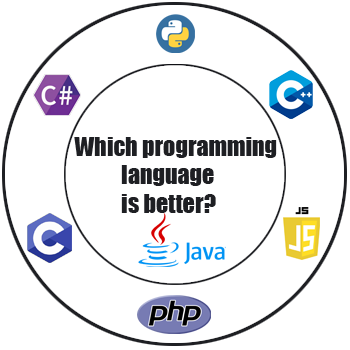
<style>
.page{position:relative;width:350px;height:350px;background:#ffffff}
.page>*{position:absolute;margin:0}
.t1{font:24px "Impact";color:#1e1f23}
</style>
<div class="page">
<p class="t1" style="left:74px;top:137px;width:203px;height:76px">Which programming<br>           language<br>           is better?</p>
</div>
